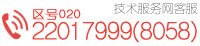
<style>
.page{position:relative;width:200px;height:46px;background:#ffffff}
.page>*{position:absolute;margin:0}
.t1{font:12px "HYe1gj";color:#747474}
.t2{font:12px "HYe1gj";letter-spacing:0.075em;color:#ec3028;font-weight:bold}
.t3{font:24.8px "HYe1gj";letter-spacing:-0.025em;color:#e5463f;font-weight:bold}
</style>
<div class="page">
<p class="t1" style="left:114px;top:2px;width:84px;height:13px">技术服务网客服</p>
<p class="t2" style="left:33px;top:9px;width:48px;height:11px">区号020</p>
<p class="t3" style="left:32px;top:20px;width:165px;height:23px">22017999(8058)</p>
</div>
